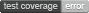
<style>
.page{position:relative;width:89px;height:13px}
.page>*{position:absolute;margin:0}
.t1{font:10px "ArialMT";color:#cccccc;scale:0.9 1}
.t2{font:10px "ArialMT";color:#ffffff;scale:0.9 1}
</style>
<div class="page">
<p class="t1" style="left:3px;top:2px;width:55px;height:9px">test coverage</p>
<p class="t2" style="left:65px;top:4px;width:20px;height:5px">error</p>
</div>
